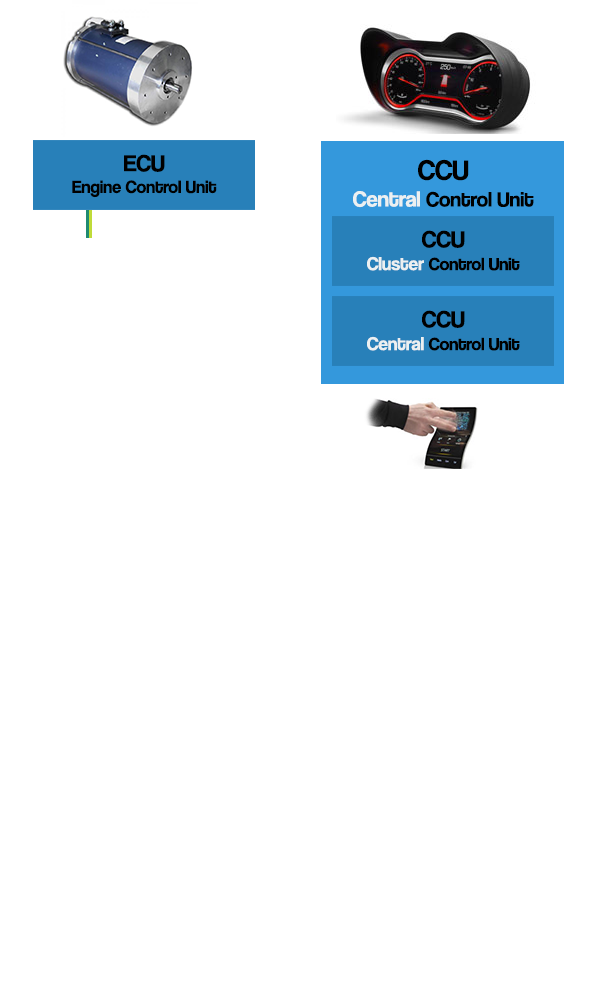
<style>
.page{position:relative;width:600px;height:1000px;background:#ffffff}
.page>*{position:absolute;margin:0}
.t1{font:18px "CoolveticaRg-Regular";color:#000000}
.t2{font:24px "CoolveticaRg-Regular";color:#000000}
.t3{font:21.3px "CoolveticaRg-Regular";color:#000000}
.t4{font:28.4px "CoolveticaRg-Regular";color:#000000}
.t5{font:22.5px "CoolveticaRg-Regular";color:#ecf0f1}
.t6{font:19px "CoolveticaRg-Regular";color:#ecf0f1}
</style>
<div class="page">
<p class="t1" style="left:72px;top:154px;width:145px;height:44px;text-align:center"><span class="t2">ECU<br></span>Engine Control Unit</p>
<p class="t3" style="left:353px;top:159px;width:181px;height:49px;text-align:center"><span class="t4">CCU<br></span><span class="t5">Central </span>Control Unit</p>
<p class="t1" style="left:367px;top:230px;width:153px;height:41px;text-align:center"><span class="t2">CCU<br></span><span class="t6">Cluster </span>Control Unit</p>
<p class="t1" style="left:367px;top:310px;width:153px;height:41px;text-align:center"><span class="t2">CCU<br></span><span class="t6">Central </span>Control Unit</p>
</div>
